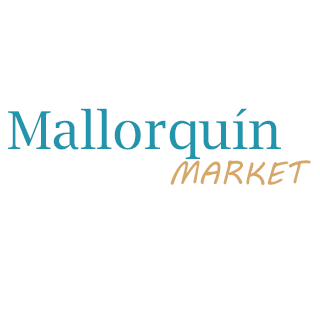
<style>
.page{position:relative;width:320px;height:320px;background:#ffffff}
.page>*{position:absolute;margin:0}
.t1{font:52.2px "LucidaBright";color:#2095ac}
.t2{font:32px "MVBoli";color:#d6a766}
</style>
<div class="page">
<p class="t1" style="left:8px;top:108px;width:273px;height:51px">Mallorquín</p>
<p class="t2" style="left:170px;top:160px;width:141px;height:25px">MARKET</p>
</div>
